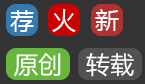
<style>
.page{position:relative;width:145px;height:84px;background:#333333}
.page>*{position:absolute;margin:0}
.t1{font:24px "MicrosoftYaHei";color:#ffffff}
</style>
<div class="page">
<p class="t1" style="left:10px;top:10px;width:24px;height:22px">荐</p>
<p class="t1" style="left:52px;top:9px;width:24px;height:23px">火</p>
<p class="t1" style="left:95px;top:9px;width:24px;height:22px">新</p>
<p class="t1" style="left:14px;top:53px;width:47px;height:24px">原创</p>
<p class="t1" style="left:86px;top:53px;width:48px;height:24px">转载</p>
</div>
